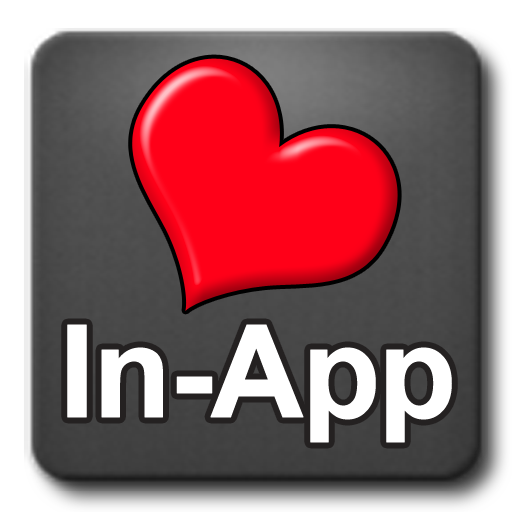
<style>
.page{position:relative;width:512px;height:512px}
.page>*{position:absolute;margin:0}
.t1{font:128px "Arial-BoldMT";letter-spacing:-0.04em;color:#ffffff;font-weight:bold}
</style>
<div class="page">
<p class="t1" style="left:67px;top:324px;width:385px;height:119px">In-App</p>
</div>
